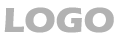
<style>
.page{position:relative;width:118px;height:40px;background:#ffffff}
.page>*{position:absolute;margin:0}
.t1{font:36px "ErasITC-Bold";color:#b2b2b2}
</style>
<div class="page">
<p class="t1" style="left:4px;top:7px;width:110px;height:26px">LOGO</p>
</div>
